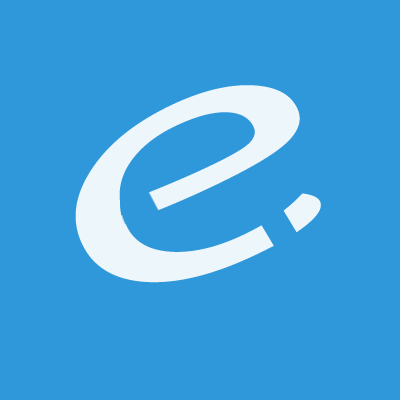
<style>
.page{position:relative;width:400px;height:400px;background:#2f98da}
.page>*{position:absolute;margin:0}
.t1{font:334.1px "STXinwei";color:#edf6fb;scale:1.79 1}
</style>
<div class="page">
<p class="t1" style="left:75px;top:85px;width:246px;height:198px;rotate:-25deg">e</p>
</div>
